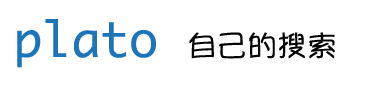
<style>
.page{position:relative;width:376px;height:85px;background:#ffffff}
.page>*{position:absolute;margin:0}
.t1{font:48px "Monaco";color:#1c75ba}
.t2{font:30px "YuppySC-Regular";color:#060606}
</style>
<div class="page">
<p class="t1" style="left:17px;top:19px;width:318px;height:49px">plato <span class="t2">自己的搜索</span></p>
</div>
